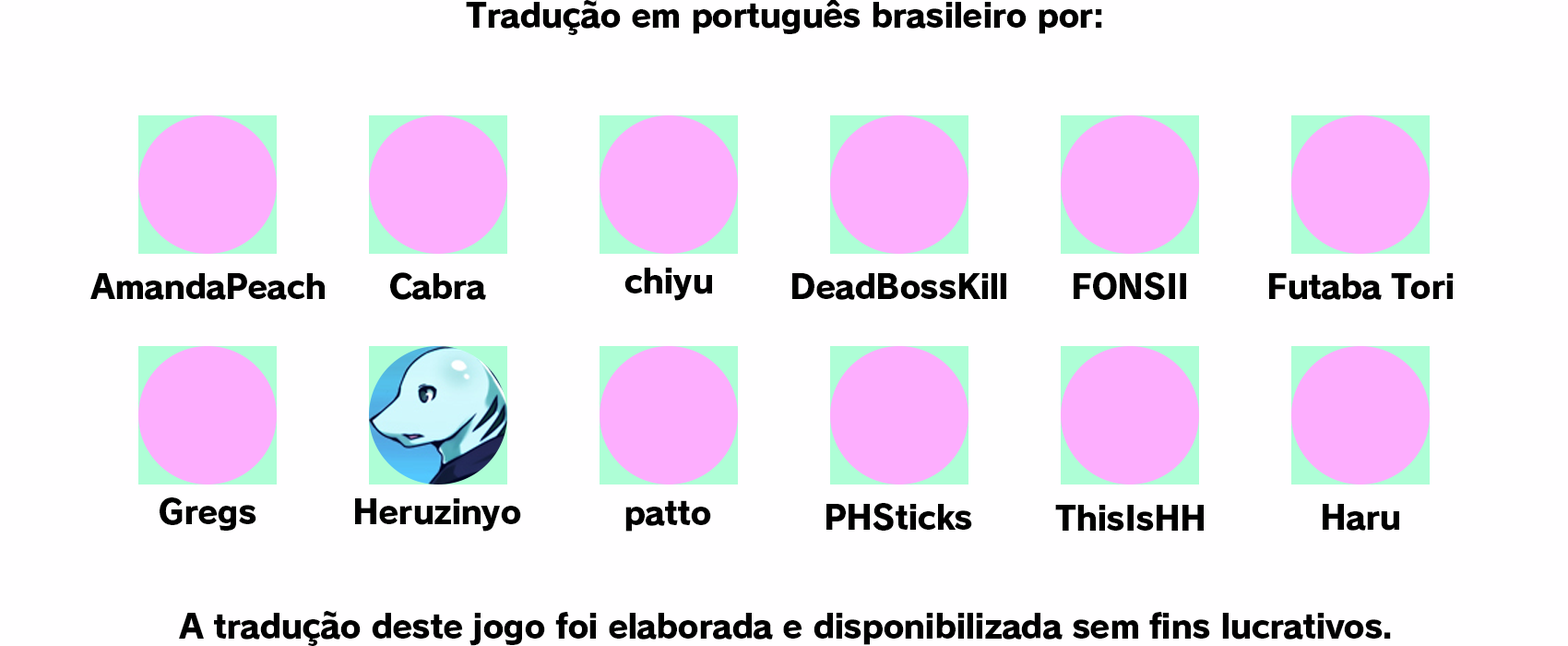
<style>
.page{position:relative;width:1568px;height:646px;background:#fffeff}
.page>*{position:absolute;margin:0}
.t1{font:33.2px "RodinPro-EB";letter-spacing:-0.032em;color:#000000}
</style>
<div class="page">
<p class="t1" style="left:466px;top:0px;width:636px;height:35px">Tradução em português brasileiro por:</p>
<p class="t1" style="left:624px;top:267px;width:88px;height:34px">chiyu</p>
<p class="t1" style="left:90px;top:273px;width:235px;height:27px">AmandaPeach</p>
<p class="t1" style="left:390px;top:272px;width:96px;height:28px">Cabra</p>
<p class="t1" style="left:792px;top:273px;width:214px;height:27px">DeadBossKill</p>
<p class="t1" style="left:1074px;top:272px;width:112px;height:28px">FONSII</p>
<p class="t1" style="left:1269px;top:273px;width:185px;height:27px">Futaba Tori</p>
<p class="t1" style="left:160px;top:497px;width:96px;height:33px">Gregs</p>
<p class="t1" style="left:355px;top:498px;width:166px;height:33px">Heruzinyo</p>
<p class="t1" style="left:625px;top:500px;width:86px;height:31px">patto</p>
<p class="t1" style="left:826px;top:503px;width:146px;height:27px">PHSticks</p>
<p class="t1" style="left:1055px;top:505px;width:149px;height:25px">ThisIsHH</p>
<p class="t1" style="left:1323px;top:504px;width:76px;height:26px">Haru</p>
<p class="t1" style="left:179px;top:611px;width:1212px;height:35px">A tradução deste jogo foi elaborada e disponibilizada sem fins lucrativos.</p>
</div>
